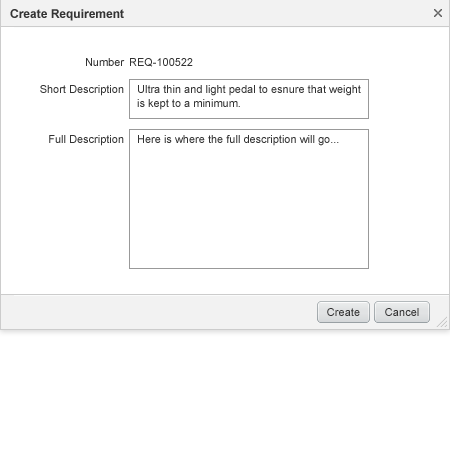
<style>
.page{position:relative;width:450px;height:450px;background:#ffffff}
.page>*{position:absolute;margin:0}
.t1{font:12px "Arial-BoldMT";color:#333333}
.t2{font:11px "ArialMT";color:#333333}
.t3{font:11px/15px "ArialMT";color:#333333}
.t4{font:11px/14px "ArialMT";color:#333333}
.t5{font:11px "ArialMT";letter-spacing:0.005em;color:#333333}
</style>
<div class="page">
<p class="t1" style="left:10px;top:9px;width:114px;height:12px">Create Requirement</p>
<p class="t2" style="left:86px;top:58px;width:39px;height:8px">Number</p>
<p class="t2" style="left:130px;top:58px;width:63px;height:9px">REQ-100522</p>
<p class="t2" style="left:40px;top:85px;width:84px;height:11px">Short Description</p>
<p class="t3" style="left:137px;top:85px;width:224px;height:25px">Ultra thin and light pedal to esnure that weight<br><span class="t4">is kept to a minimum.</span></p>
<p class="t2" style="left:49px;top:135px;width:75px;height:11px">Full Description</p>
<p class="t2" style="left:138px;top:135px;width:201px;height:11px">Here is where the full description will go...</p>
<p class="t5" style="left:327px;top:308px;width:33px;height:8px">Create</p>
<p class="t5" style="left:385px;top:308px;width:34px;height:8px">Cancel</p>
</div>
